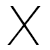
<style>
.page{position:relative;width:50px;height:50px;background:#ffffff}
.page>*{position:absolute;margin:0}
.t1{font:58.4px "ErasITC-Light";color:#000000}
</style>
<div class="page">
<p class="t1" style="left:7px;top:6px;width:34px;height:39px">X</p>
</div>
